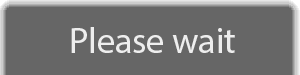
<style>
.page{position:relative;width:300px;height:75px;background:#666666}
.page>*{position:absolute;margin:0}
.t1{font:36px "MyriadPro-Regular";color:#eeeeee}
</style>
<div class="page">
<p class="t1" style="left:71px;top:27px;width:164px;height:26px">Please wait</p>
</div>
